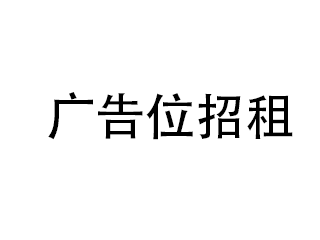
<style>
.page{position:relative;width:320px;height:240px;background:#ffffff}
.page>*{position:absolute;margin:0}
.t1{font:50px "AdobeHeitiStd-Regular";color:#000000}
</style>
<div class="page">
<p class="t1" style="left:48px;top:92px;width:245px;height:48px">广告位招租</p>
</div>
